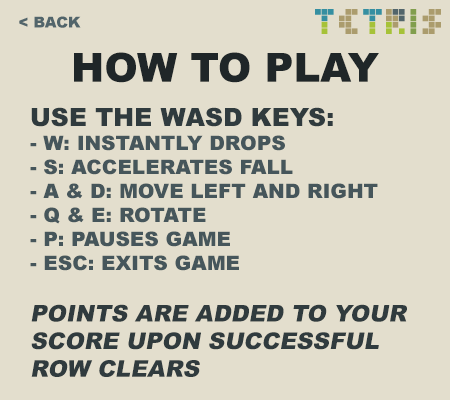
<style>
.page{position:relative;width:450px;height:400px;background:#e3decd}
.page>*{position:absolute;margin:0}
.t1{font:15px "Arial-Black";color:#52656b;text-transform:uppercase}
.t2{font:40px "Arial-Black";color:#1f2628;text-transform:uppercase}
.t3{font:20px "Arial-Black";color:#46565b;text-transform:uppercase}
.t4{font:25px "Arial-Black";color:#303b3e;text-transform:uppercase}
.t5{font:23px "Arial-Black";color:#303b3e;text-transform:uppercase;font-style:italic}
</style>
<div class="page">
<p class="t1" style="left:19px;top:16px;width:62px;height:12px">&lt; Back</p>
<p class="t2" style="left:74px;top:52px;width:305px;height:31px">How to Play</p>
<p class="t3" style="left:30px;top:107px;width:377px;height:270px"><span class="t4">UsE the WASD keys:<br></span>- W: instantly drops<br>- S: Accelerates fall<br>- A &amp; D: move left and right<br>- Q &amp; E: Rotate<br>- P: Pauses game<br>- ESC: Exits game<br><br><span class="t5">Points are added to your score upon successful row clears</span></p>
</div>
